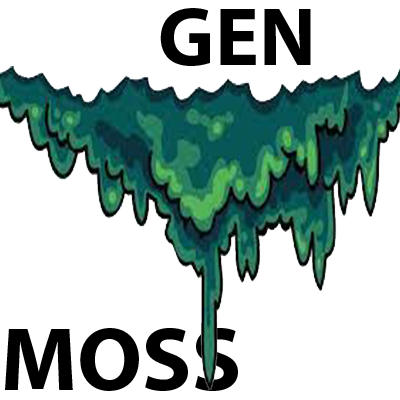
<style>
.page{position:relative;width:400px;height:400px;background:#ffffff}
.page>*{position:absolute;margin:0}
.t1{font:82.4px "MyriadPro-Bold";color:#000000}
.t2{font:91.1px "MyriadPro-Bold";color:#000000}
</style>
<div class="page">
<p class="t1" style="left:160px;top:8px;width:151px;height:58px">GEN</p>
<p class="t2" style="left:5px;top:328px;width:233px;height:63px">MOSS</p>
</div>
